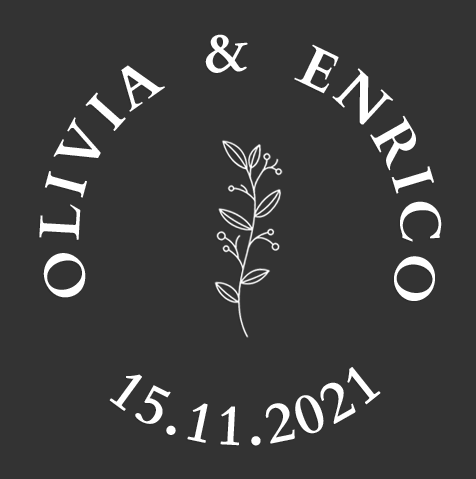
<style>
.page{position:relative;width:476px;height:479px;background:#333333}
.page>*{position:absolute;margin:0}
.t1{font:57px "Cardo-Bold";letter-spacing:0.075em;color:#ffffff}
</style>
<div class="page">
<p class="t1" style="left:39px;top:34px;width:403px;height:267px;rotate:-23deg">OLIVIA  &amp;  ENRICO</p>
<p class="t1" style="left:109px;top:367px;width:272px;height:79px;rotate:38deg">15.11.2021</p>
</div>
